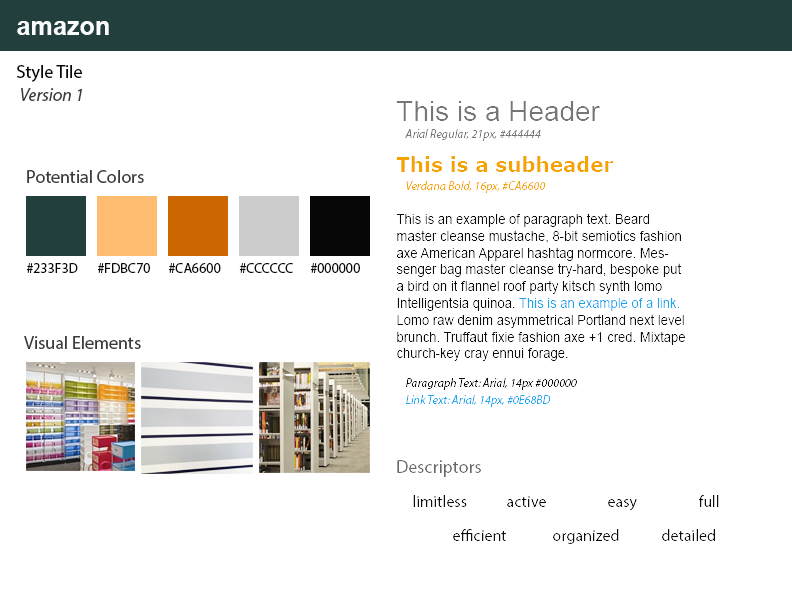
<style>
.page{position:relative;width:792px;height:612px;background:#ffffff}
.page>*{position:absolute;margin:0}
.t1{font:24.9px "Arial-BoldMT";color:#f9fbfc}
.t2{font:18px "MyriadPro-Regular";color:#060606}
.t3{font:18px "MyriadPro-It";color:#3b3c3c}
.t4{font:28px "ArialMT";color:#767676}
.t5{font:12px "MyriadPro-It";color:#767676}
.t6{font:20px "Verdana-Bold";color:#f5a300}
.t7{font:18px "MyriadPro-Regular";color:#3b3c3c}
.t8{font:12px "MyriadPro-It";color:#f5a300}
.t9{font:14px "ArialMT";color:#060606;scale:0.93 1}
.t10{font:14px "ArialMT";color:#0e68bd;scale:0.93 1}
.t11{font:14px "MyriadPro-Regular";color:#070707}
.t12{font:12px "MyriadPro-It";color:#060606}
.t13{font:12px "MyriadPro-It";color:#1ba6ee}
.t14{font:18px "MyriadPro-Regular";color:#686a6a}
.t15{font:16px "MyriadPro-Regular";color:#070707}
</style>
<div class="page">
<p class="t1" style="left:17px;top:21px;width:92px;height:14px">amazon</p>
<p class="t2" style="left:17px;top:65px;width:65px;height:17px">Style Tile</p>
<p class="t3" style="left:21px;top:88px;width:61px;height:13px">Version 1</p>
<p class="t4" style="left:396px;top:101px;width:204px;height:20px">This is a Header</p>
<p class="t5" style="left:405px;top:129px;width:136px;height:12px">Arial Regular, 21px, #444444</p>
<p class="t6" style="left:396px;top:156px;width:218px;height:16px">This is a subheader</p>
<p class="t7" style="left:27px;top:170px;width:117px;height:13px">Potential Colors</p>
<p class="t8" style="left:406px;top:181px;width:140px;height:12px">Verdana Bold, 16px, #CA6600</p>
<p class="t9" style="left:396px;top:213px;width:289px;height:148px">This is an example of paragraph text. Beard master cleanse mustache, 8-bit semiotics fashion axe American Apparel hashtag normcore. Messenger bag master cleanse try-hard, bespoke put a bird on it flannel roof party kitsch synth lomo Intelligentsia quinoa. <span class="t10">This is an example of a link. </span>Lomo raw denim asymmetrical Portland next level brunch. Truffaut fixie fashion axe +1 cred. Mixtape church-key cray ennui forage.</p>
<p class="t11" style="left:26px;top:263px;width:52px;height:10px">#233F3D</p>
<p class="t11" style="left:97px;top:263px;width:53px;height:10px">#FDBC70</p>
<p class="t11" style="left:168px;top:263px;width:53px;height:10px">#CA6600</p>
<p class="t11" style="left:239px;top:263px;width:54px;height:10px">#CCCCCC</p>
<p class="t11" style="left:310px;top:263px;width:50px;height:10px">#000000</p>
<p class="t7" style="left:24px;top:336px;width:117px;height:13px">Visual Elements</p>
<p class="t12" style="left:406px;top:378px;width:171px;height:12px">Paragraph Text: Arial, 14px #000000</p>
<p class="t13" style="left:406px;top:395px;width:145px;height:12px">Link Text: Arial, 14px, #0E68BD</p>
<p class="t14" style="left:397px;top:460px;width:84px;height:17px">Descriptors</p>
<p class="t15" style="left:413px;top:495px;width:54px;height:12px">limitless</p>
<p class="t15" style="left:507px;top:496px;width:39px;height:11px">active</p>
<p class="t15" style="left:698px;top:495px;width:21px;height:12px">full</p>
<p class="t15" style="left:608px;top:499px;width:29px;height:12px">easy</p>
<p class="t15" style="left:453px;top:529px;width:53px;height:12px">efficient</p>
<p class="t15" style="left:553px;top:529px;width:66px;height:15px">organized</p>
<p class="t15" style="left:662px;top:529px;width:53px;height:12px">detailed</p>
</div>
